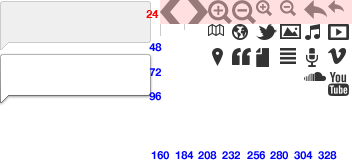
<style>
.page{position:relative;width:352px;height:160px;background:#ffffff}
.page>*{position:absolute;margin:0}
.t1{font:11px "HelveticaNeue-Bold";color:#ff0000}
.t2{font:11px "HelveticaNeue-Bold";color:#0000ff}
</style>
<div class="page">
<p class="t1" style="left:146px;top:10px;width:13px;height:8px">24</p>
<p class="t2" style="left:149px;top:43px;width:13px;height:9px">48</p>
<p class="t2" style="left:149px;top:68px;width:12px;height:8px">72</p>
<p class="t2" style="left:149px;top:92px;width:12px;height:9px">96</p>
<p class="t2" style="left:151px;top:151px;width:18px;height:9px">160</p>
<p class="t2" style="left:175px;top:151px;width:19px;height:9px">184</p>
<p class="t2" style="left:198px;top:151px;width:19px;height:9px">208</p>
<p class="t2" style="left:222px;top:151px;width:18px;height:9px">232</p>
<p class="t2" style="left:247px;top:151px;width:18px;height:9px">256</p>
<p class="t2" style="left:270px;top:151px;width:18px;height:9px">280</p>
<p class="t2" style="left:294px;top:151px;width:19px;height:9px">304</p>
<p class="t2" style="left:318px;top:151px;width:19px;height:9px">328</p>
</div>
